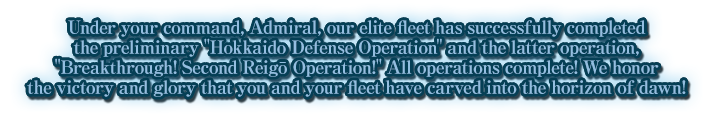
<style>
.page{position:relative;width:714px;height:116px;background:#053f55}
.page>*{position:absolute;margin:0}
.t1{font:18px/20px "RyuminPro-ExBold";letter-spacing:-0.04em;color:#93bee0}
</style>
<div class="page">
<p class="t1" style="left:27px;top:20px;width:659px;height:77px;text-align:center">Under your command, Admiral, our elite fleet has successfully completed<br>the preliminary "Hokkaido Defense Operation" and the latter operation,<br>"Breakthrough! Second Reigō Operation!" All operations complete! We honor<br>the victory and glory that you and your fleet have carved into the horizon of dawn!</p>
</div>
